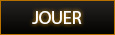
<style>
.page{position:relative;width:115px;height:35px}
.page>*{position:absolute;margin:0}
.t1{font:18px "MyriadPro-Regular";color:#ffffff}
</style>
<div class="page">
<p class="t1" style="left:32px;top:11px;width:50px;height:13px">JOUER</p>
</div>
